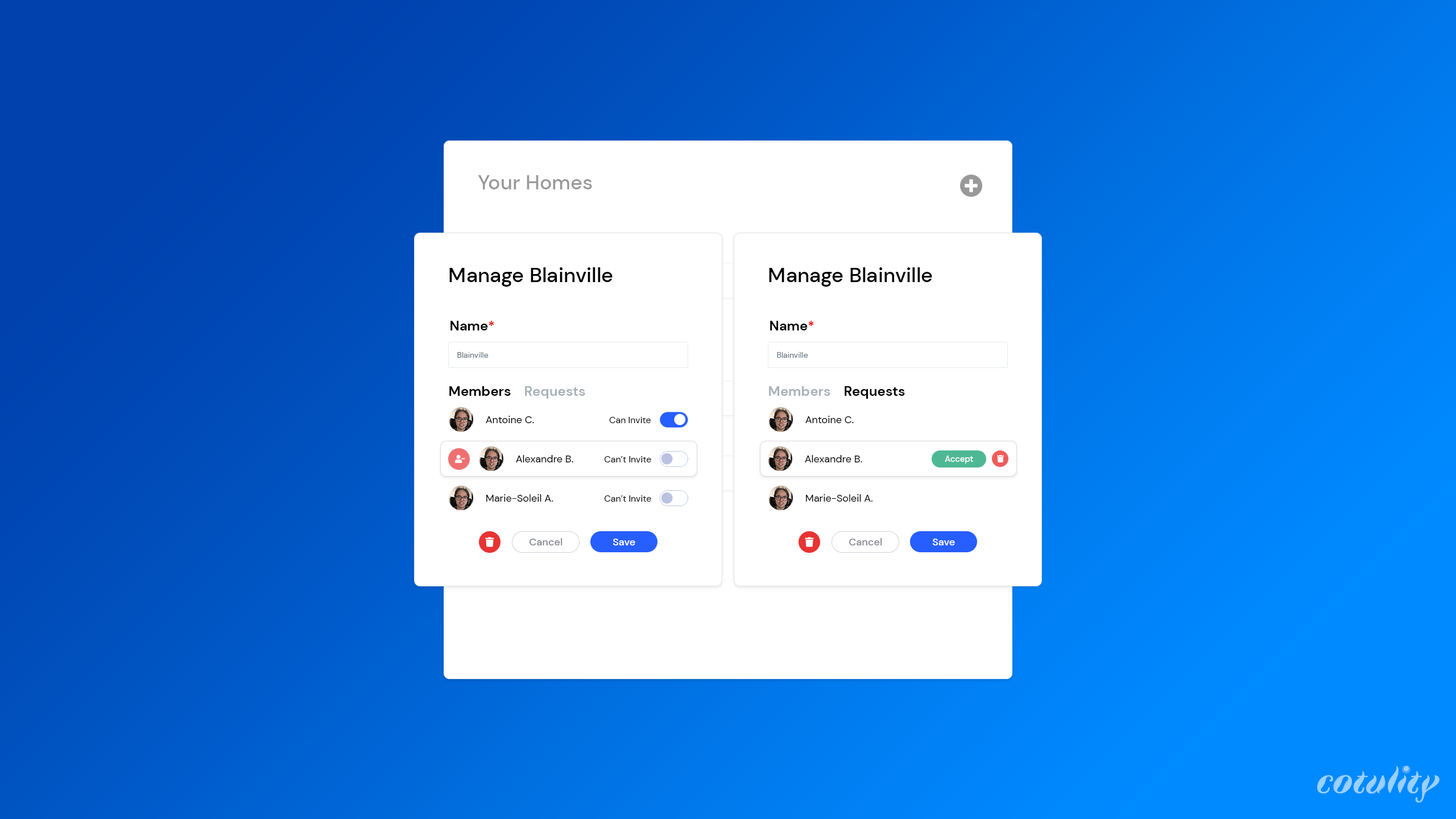
<style>
.page{position:relative;width:1456px;height:819px;background:#ffffff}
.page>*{position:absolute;margin:0}
.t1{font:20.5px "DMSans-Medium";color:#999999}
.t2{font:20.5px "DMSans-Medium";color:#000000}
.t3{font:13.6px "DMSans-Bold";color:#000000}
.t4{font:13.6px "DMSans-Bold";color:#ea0000}
.t5{font:8px "DMSans-Regular";color:#657786}
.t6{font:13.6px "DMSans-Bold";color:#a9b2ba}
.t7{font:10.2px "DMSans-Regular";color:#000000}
.t8{font:9.1px "DMSans-Regular";color:#000000}
.t9{font:8.3px "DMSans-Medium";color:#ffffff}
.t10{font:10.2px "DMSans-Medium";color:#888a93}
.t11{font:10.2px "DMSans-Medium";color:#ffffff}
.t12{font:36.9px "Faune-DisplayBoldItalic";color:#99d0ff}
.t13{font:16.6px "Faune-DisplayBlack"}
</style>
<div class="page">
<p class="t1" style="left:478px;top:175px;width:114px;height:14px">Your Homes</p>
<p class="t2" style="left:449px;top:267px;width:164px;height:20px">Manage Blainville</p>
<p class="t2" style="left:769px;top:267px;width:163px;height:20px">Manage Blainville</p>
<p class="t3" style="left:450px;top:321px;width:44px;height:9px">Name<span class="t4">*</span></p>
<p class="t3" style="left:770px;top:321px;width:44px;height:9px">Name<span class="t4">*</span></p>
<p class="t5" style="left:457px;top:352px;width:32px;height:6px">Blainville</p>
<p class="t5" style="left:777px;top:352px;width:31px;height:6px">Blainville</p>
<p class="t6" style="left:449px;top:386px;width:136px;height:13px"><span class="t3">Members    </span>Requests</p>
<p class="t6" style="left:769px;top:386px;width:136px;height:13px"><span class="t3">Members    </span>Requests</p>
<p class="t3" style="left:769px;top:386px;width:136px;height:13px"><span class="t6">Members    </span>Requests</p>
<p class="t7" style="left:486px;top:416px;width:48px;height:7px">Antoine C.</p>
<p class="t8" style="left:609px;top:417px;width:42px;height:6px">Can Invite</p>
<p class="t7" style="left:805px;top:416px;width:49px;height:7px">Antoine C.</p>
<p class="t7" style="left:805px;top:416px;width:49px;height:7px">Antoine C.</p>
<p class="t7" style="left:516px;top:455px;width:57px;height:7px">Alexandre B.</p>
<p class="t8" style="left:604px;top:456px;width:47px;height:6px">Can’t Invite</p>
<p class="t7" style="left:805px;top:455px;width:57px;height:7px">Alexandre B.</p>
<p class="t9" style="left:945px;top:456px;width:28px;height:8px">Accept</p>
<p class="t7" style="left:486px;top:494px;width:67px;height:8px">Marie-Soleil A.</p>
<p class="t8" style="left:604px;top:495px;width:47px;height:7px">Can’t Invite</p>
<p class="t7" style="left:806px;top:494px;width:66px;height:8px">Marie-Soleil A.</p>
<p class="t7" style="left:806px;top:494px;width:66px;height:8px">Marie-Soleil A.</p>
<p class="t10" style="left:529px;top:538px;width:33px;height:7px">Cancel</p>
<p class="t11" style="left:613px;top:539px;width:22px;height:6px">Save</p>
<p class="t10" style="left:849px;top:538px;width:33px;height:7px">Cancel</p>
<p class="t11" style="left:933px;top:539px;width:22px;height:6px">Save</p>
<p class="t12" style="left:1317px;top:766px;width:122px;height:36px">cotulity</p>
<p class="t13" style="left:1402px;top:765px;width:8px;height:8px;rotate:90deg">o</p>
<p class="t12" style="left:1407px;top:771px;width:14px;height:22px">t</p>
<p class="t12" style="left:1333px;top:775px;width:18px;height:18px">o</p>
<p class="t12" style="left:1367px;top:776px;width:19px;height:18px">u</p>
</div>
